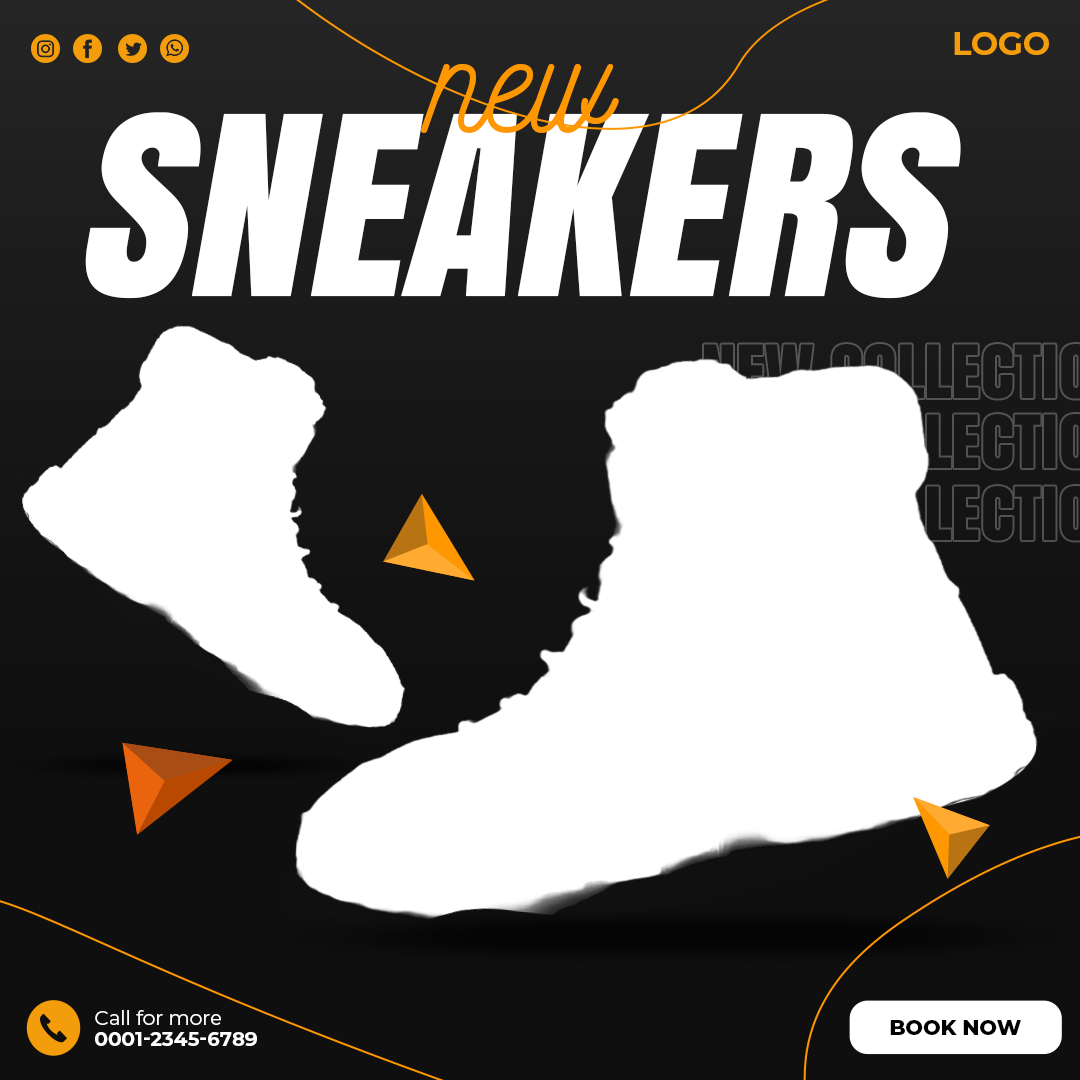
<style>
.page{position:relative;width:1080px;height:1080px;background:#ffffff}
.page>*{position:absolute;margin:0}
.t1{font:32.4px "Montserrat-Bold";color:#f49d0c;text-transform:uppercase}
.t2{font:145.8px "Nickainley-Normal";color:#ff9701}
.t3{font:234.5px "Anton";color:#ffffff;text-transform:uppercase;font-style:italic}
.t4{font:19.9px "Montserrat-Regular";color:#ffffff}
.t5{font:20.9px "Montserrat-ExtraBold";color:#000000}
.t6{font:19.9px "Montserrat-Bold";color:#ffffff;text-transform:uppercase}
</style>
<div class="page">
<p class="t1" style="left:954px;top:32px;width:95px;height:23px">logo</p>
<p class="t2" style="left:421px;top:64px;width:198px;height:69px">new</p>
<p class="t3" style="left:85px;top:112px;width:876px;height:187px">sneakers</p>
<p class="t4" style="left:95px;top:1010px;width:126px;height:15px">Call for more</p>
<p class="t5" style="left:890px;top:1020px;width:131px;height:15px">BOOK NOW</p>
<p class="t6" style="left:95px;top:1032px;width:162px;height:14px">0001-2345-6789</p>
</div>
